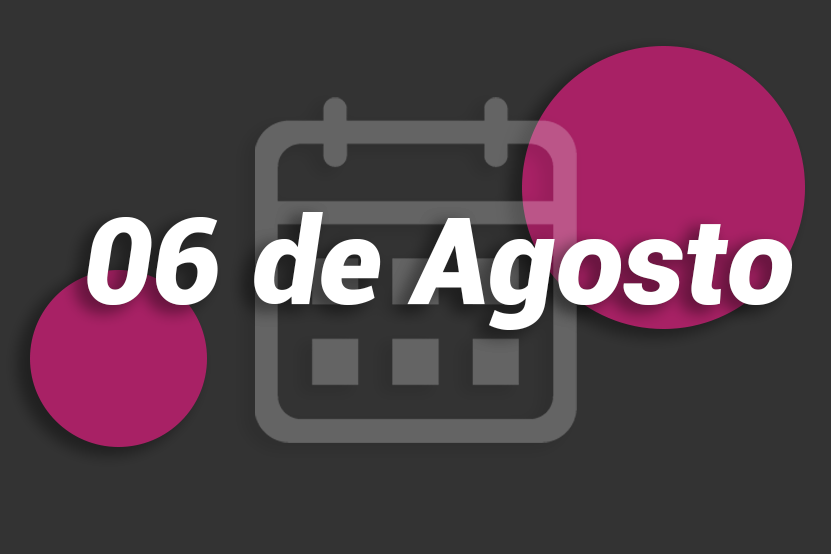
<style>
.page{position:relative;width:831px;height:554px;background:#333333}
.page>*{position:absolute;margin:0}
.t1{font:120px "Roboto-BlackItalic";color:#ffffff}
</style>
<div class="page">
<p class="t1" style="left:87px;top:212px;width:705px;height:118px">06 de Agosto</p>
</div>
